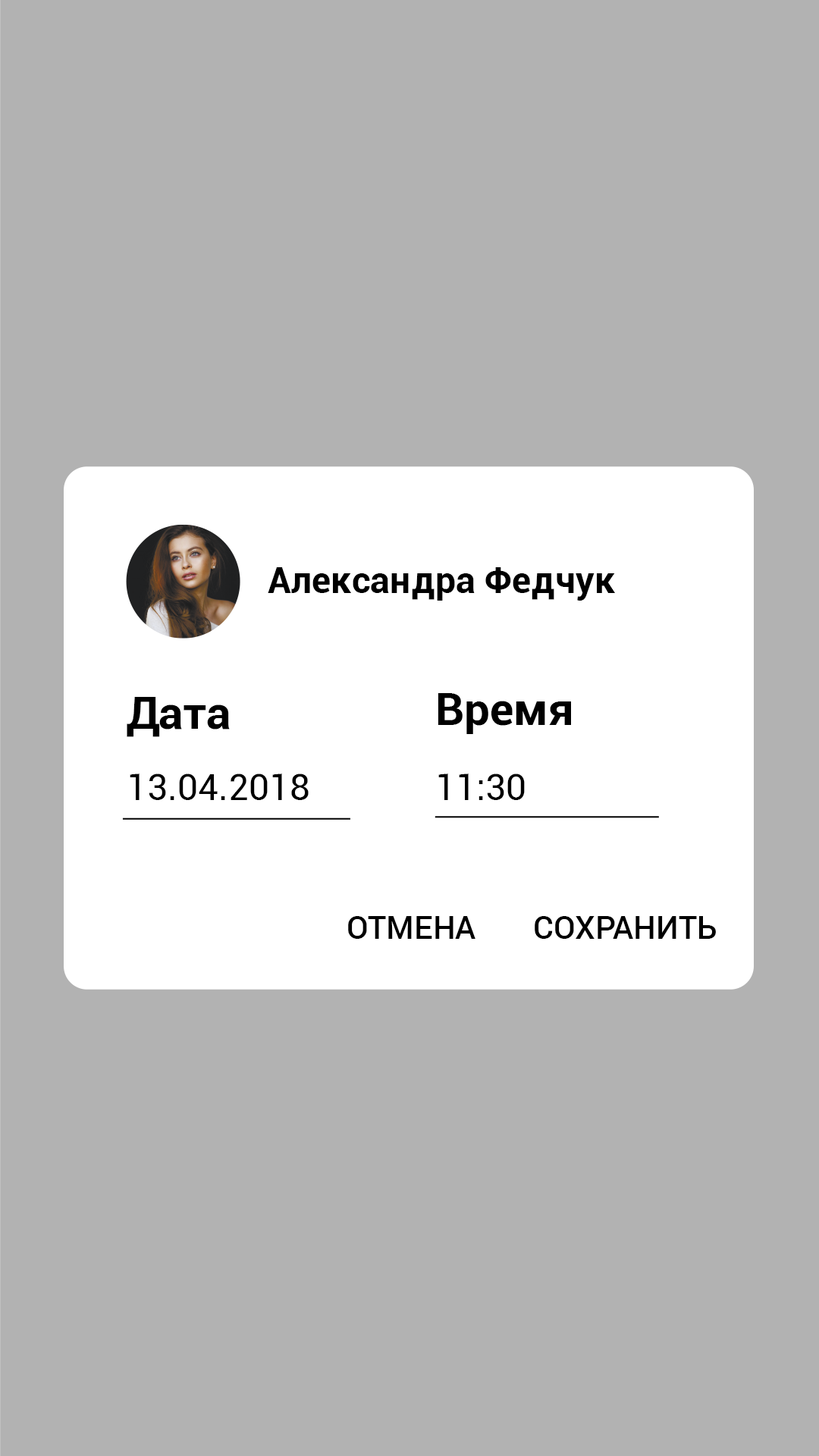
<style>
.page{position:relative;width:819px;height:1456px;background:#b2b2b2}
.page>*{position:absolute;margin:0}
.t1{font:36.4px "Roboto-Bold";color:#000000}
.t2{font:45.5px "Roboto-Bold";color:#000000}
.t3{font:36.4px "Roboto-Regular";color:#000000}
.t4{font:31.8px "Roboto-Medium";color:#000000}
</style>
<div class="page">
<p class="t1" style="left:268px;top:567px;width:347px;height:34px">Александра Федчук</p>
<p class="t2" style="left:127px;top:697px;width:103px;height:40px">Дата</p>
<p class="t2" style="left:438px;top:693px;width:133px;height:41px">Время</p>
<p class="t3" style="left:130px;top:773px;width:179px;height:27px">13.04.2018</p>
<p class="t3" style="left:438px;top:773px;width:87px;height:27px">11:30</p>
<p class="t4" style="left:348px;top:916px;width:127px;height:23px">ОТМЕНА</p>
<p class="t4" style="left:535px;top:916px;width:181px;height:23px">СОХРАНИТЬ</p>
</div>
